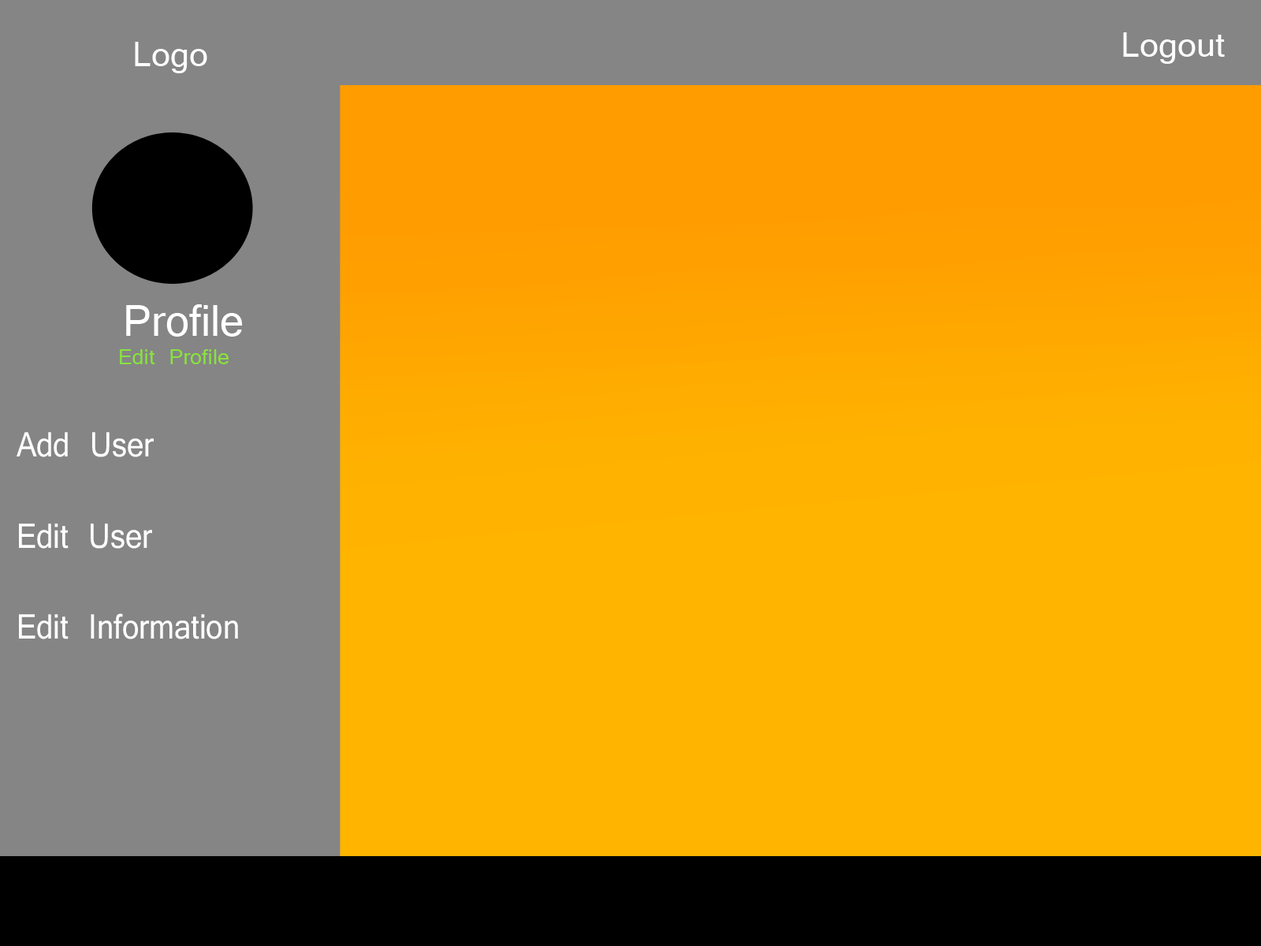
<style>
.page{position:relative;width:1261px;height:946px;background:#858585}
.page>*{position:absolute;margin:0}
.t1{font:37.8px "Vrinda";color:#fefefe}
.t2{font:47.3px "Vrinda";color:#ffffff}
.t3{font:23.6px "Vrinda";color:#88e33e}
.t4{font:37.8px "Vrinda";color:#ffffff;scale:0.89 1}
</style>
<div class="page">
<p class="t1" style="left:135px;top:42px;width:72px;height:31px">Logo</p>
<p class="t1" style="left:1123px;top:32px;width:102px;height:32px">Logout</p>
<p class="t2" style="left:126px;top:304px;width:117px;height:33px">Profile</p>
<p class="t3" style="left:120px;top:349px;width:109px;height:15px">Edit Profile</p>
<p class="t4" style="left:17px;top:432px;width:221px;height:207px">Add User <br><br>Edit User<br><br>Edit Information</p>
</div>
